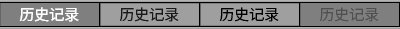
<style>
.page{position:relative;width:400px;height:29px;background:#7f7f7f}
.page>*{position:absolute;margin:0}
.t1{font:15px "SourceHanSansSC-Normal";color:#ffffff}
.t2{font:15px "SourceHanSansSC-Normal";color:#191919}
.t3{font:15px "SourceHanSansSC-Normal";color:#000000}
.t4{font:15px "SourceHanSansSC-Normal";color:#505050}
</style>
<div class="page">
<p class="t1" style="left:19px;top:7px;width:60px;height:15px">历史记录</p>
<p class="t2" style="left:119px;top:7px;width:60px;height:15px">历史记录</p>
<p class="t3" style="left:219px;top:7px;width:60px;height:15px">历史记录</p>
<p class="t4" style="left:319px;top:7px;width:60px;height:15px">历史记录</p>
</div>
